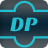
<style>
.page{position:relative;width:48px;height:48px}
.page>*{position:absolute;margin:0}
.t1{font:20px "SansitaOne";color:#21bfd0}
</style>
<div class="page">
<p class="t1" style="left:10px;top:17px;width:28px;height:15px">DP</p>
</div>
